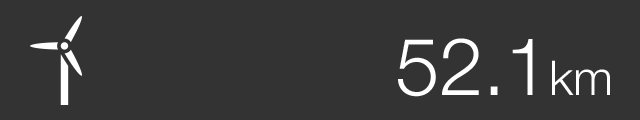
<style>
.page{position:relative;width:640px;height:120px;background:#333333}
.page>*{position:absolute;margin:0}
.t1{font:80px "HelveticaNeue-Light";color:#ffffff}
.t2{font:48px "HelveticaNeue-Light";color:#ffffff}
</style>
<div class="page">
<p class="t1" style="left:398px;top:38px;width:212px;height:59px">52.1<span class="t2">km</span></p>
</div>
